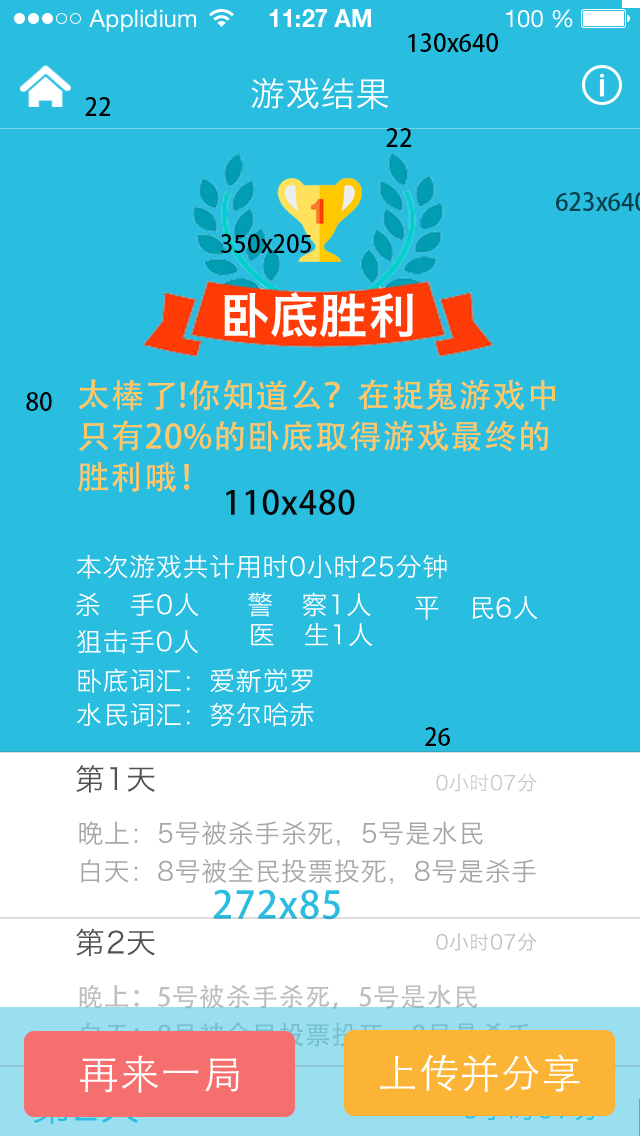
<style>
.page{position:relative;width:640px;height:1136px;background:#29bde0}
.page>*{position:absolute;margin:0}
.t1{font:24px "AdobeHeitiStd-Regular";color:#000000}
.t2{font:34px "HiraginoSansGB-W3";letter-spacing:0.025em;color:#ffffff}
.t3{font:48.1px "HiraginoSansGB-W6";letter-spacing:0.025em;color:#ffffff}
.t4{font:33px/41px "AdobeHeitiStd-Regular";letter-spacing:0.025em;color:#ffc865}
.t5{font:33px "AdobeHeitiStd-Regular";letter-spacing:0.025em;color:#070707}
.t6{font:26px "HiraginoSansGB-W3";letter-spacing:0.025em;color:#ffffff}
.t7{font:26px/34px "HiraginoSansGB-W3";letter-spacing:0.025em;color:#ffffff}
.t8{font:30px "HiraginoSansGB-W3";letter-spacing:0.025em;color:#515151}
.t9{font:20px "HiraginoSansGB-W3";letter-spacing:0.025em;color:#c7c7c7}
.t10{font:26px/19px "HiraginoSansGB-W3";letter-spacing:0.025em;color:#a6a6a6}
.t11{font:37.8px "AdobeHeitiStd-Regular";letter-spacing:0.025em;color:#29bde0}
.t12{font:20px "HiraginoSansGB-W3";letter-spacing:0.025em;color:#bebebe}
.t13{font:26px/19px "AdobeHeitiStd-Regular";letter-spacing:0.025em}
.t14{font:40px "STHeitiSC-Light";letter-spacing:0.025em;color:#ffffff}
</style>
<div class="page">
<p class="t1" style="left:408px;top:33px;width:90px;height:19px">130x640</p>
<p class="t2" style="left:251px;top:78px;width:138px;height:31px">游戏结果</p>
<p class="t1" style="left:85px;top:97px;width:25px;height:19px">22</p>
<p class="t1" style="left:386px;top:128px;width:25px;height:19px">22</p>
<p class="t1" style="left:221px;top:234px;width:90px;height:19px">350x205</p>
<p class="t3" style="left:224px;top:292px;width:189px;height:46px">卧底胜利</p>
<p class="t4" style="left:78px;top:379px;width:478px;height:113px">太棒了!你知道么？在捉鬼游戏中<br>只有20%的卧底取得游戏最终的<br>胜利哦！</p>
<p class="t1" style="left:26px;top:392px;width:26px;height:19px">80</p>
<p class="t5" style="left:226px;top:489px;width:129px;height:26px">110x480</p>
<p class="t6" style="left:76px;top:554px;width:371px;height:25px">本次游戏共计用时0小时25分钟</p>
<p class="t6" style="left:76px;top:592px;width:295px;height:25px">杀   手0人     警   察1人</p>
<p class="t6" style="left:415px;top:596px;width:123px;height:24px">平   民6人</p>
<p class="t6" style="left:77px;top:629px;width:121px;height:25px">狙击手0人</p>
<p class="t6" style="left:251px;top:623px;width:122px;height:24px">医   生1人</p>
<p class="t7" style="left:77px;top:668px;width:237px;height:59px">卧底词汇：爱新觉罗<br>水民词汇：努尔哈赤</p>
<p class="t1" style="left:425px;top:727px;width:25px;height:19px">26</p>
<p class="t8" style="left:76px;top:765px;width:79px;height:28px">第1天</p>
<p class="t9" style="left:436px;top:773px;width:101px;height:19px">0小时07分</p>
<p class="t10" style="left:79px;top:821px;width:457px;height:63px">晚上：5号被杀手杀死，5号是水民<br> <br>白天：8号被全民投票投死，8号是杀手</p>
<p class="t11" style="left:213px;top:889px;width:127px;height:31px">272x85</p>
<p class="t8" style="left:76px;top:928px;width:79px;height:28px">第2天</p>
<p class="t12" style="left:436px;top:933px;width:101px;height:18px">0小时07分</p>
<p class="t13" style="left:79px;top:984px;width:452px;height:63px">晚上：5号被杀手杀死，5号是水民<br> <br>白天：8号被全民投票投死，8号是杀手</p>
<p class="t14" style="left:80px;top:1055px;width:159px;height:38px">再来一局</p>
<p class="t14" style="left:380px;top:1054px;width:200px;height:38px">上传并分享</p>
</div>
